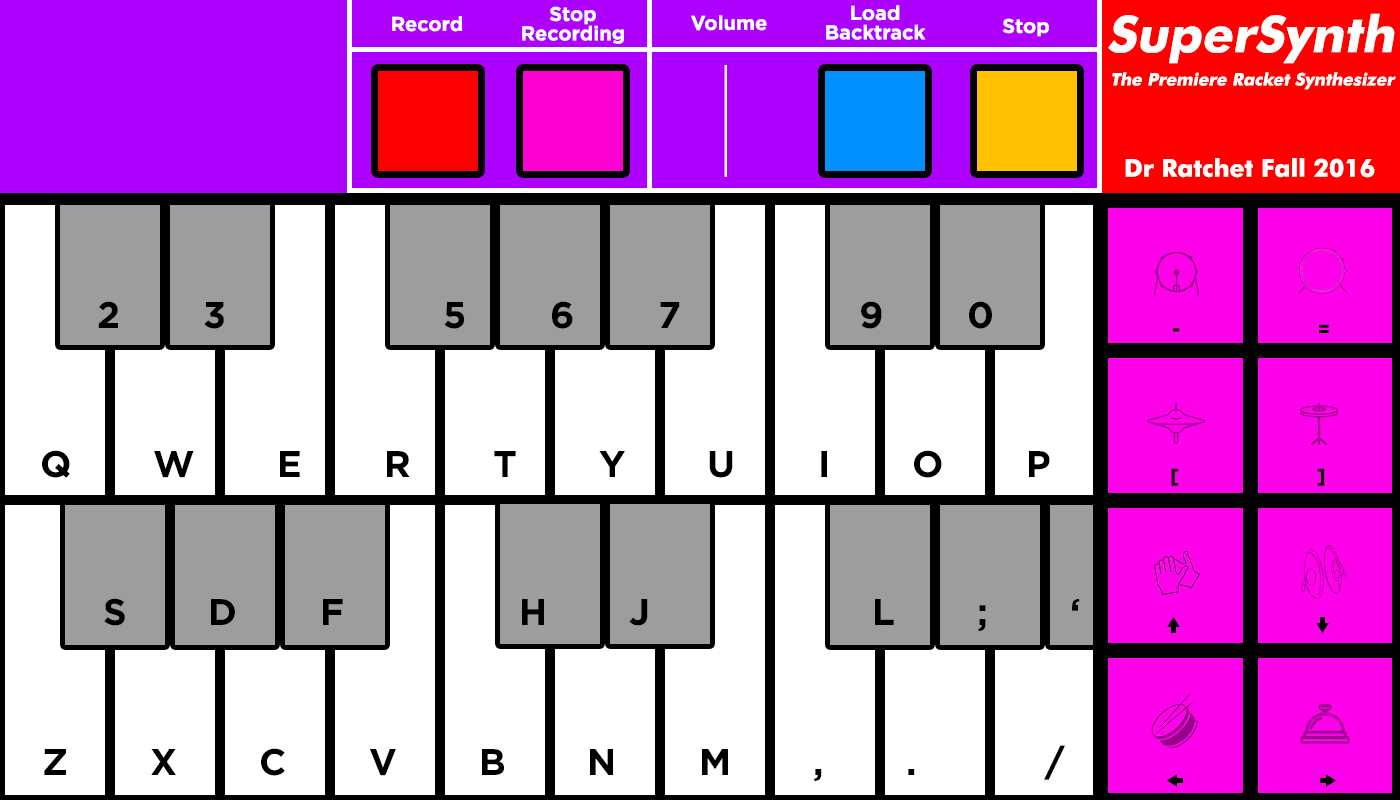
<style>
.page{position:relative;width:1400px;height:800px;background:#ffffff}
.page>*{position:absolute;margin:0}
.t1{font:20px/19.4px "Gotham-Bold";color:#ffffff}
.t2{font:20px "Gotham-Bold";color:#ffffff}
.t3{font:17.2px/33.4px "FuturaBT-Bold";color:#ffffff;font-style:italic}
.t4{font:50.4px/33.4px "FuturaBT-Bold";color:#ffffff;font-style:italic}
.t5{font:24.6px "FuturaBT-Bold";color:#ffffff}
.t6{font:37px "Gotham-Bold";letter-spacing:0.98em;color:#000000}
.t7{font:20px "Gotham-Bold";letter-spacing:3.28em;color:#000000}
.t8{font:37px "Gotham-Bold";letter-spacing:0.96em;color:#000000}
</style>
<div class="page">
<p class="t1" style="left:522px;top:6px;width:102px;height:38px;text-align:center">Stop<br>Recording</p>
<p class="t1" style="left:826px;top:5px;width:100px;height:35px;text-align:center">Load<br>Backtrack</p>
<p class="t2" style="left:392px;top:16px;width:70px;height:16px">Record</p>
<p class="t2" style="left:691px;top:15px;width:76px;height:16px">Volume</p>
<p class="t3" style="left:1108px;top:13px;width:288px;height:77px;text-align:right"><span class="t4">SuperSynth<br></span>The Premiere Racket Synthesizer</p>
<p class="t2" style="left:1002px;top:18px;width:47px;height:19px">Stop</p>
<p class="t5" style="left:1125px;top:158px;width:250px;height:20px">Dr Ratchet Fall 2016</p>
<p class="t6" style="left:98px;top:301px;width:894px;height:28px">2 3    5 6 7   9 0</p>
<p class="t7" style="left:1173px;top:324px;width:156px;height:9px">- =</p>
<p class="t8" style="left:42px;top:450px;width:1008px;height:28px">Q W E R T Y U I O P</p>
<p class="t7" style="left:1171px;top:468px;width:154px;height:18px">[ ]</p>
<p class="t8" style="left:104px;top:598px;width:976px;height:33px">S D F   H J    L ; ‘</p>
<p class="t8" style="left:44px;top:745px;width:1022px;height:36px">Z X C V B N M , .  /</p>
</div>
